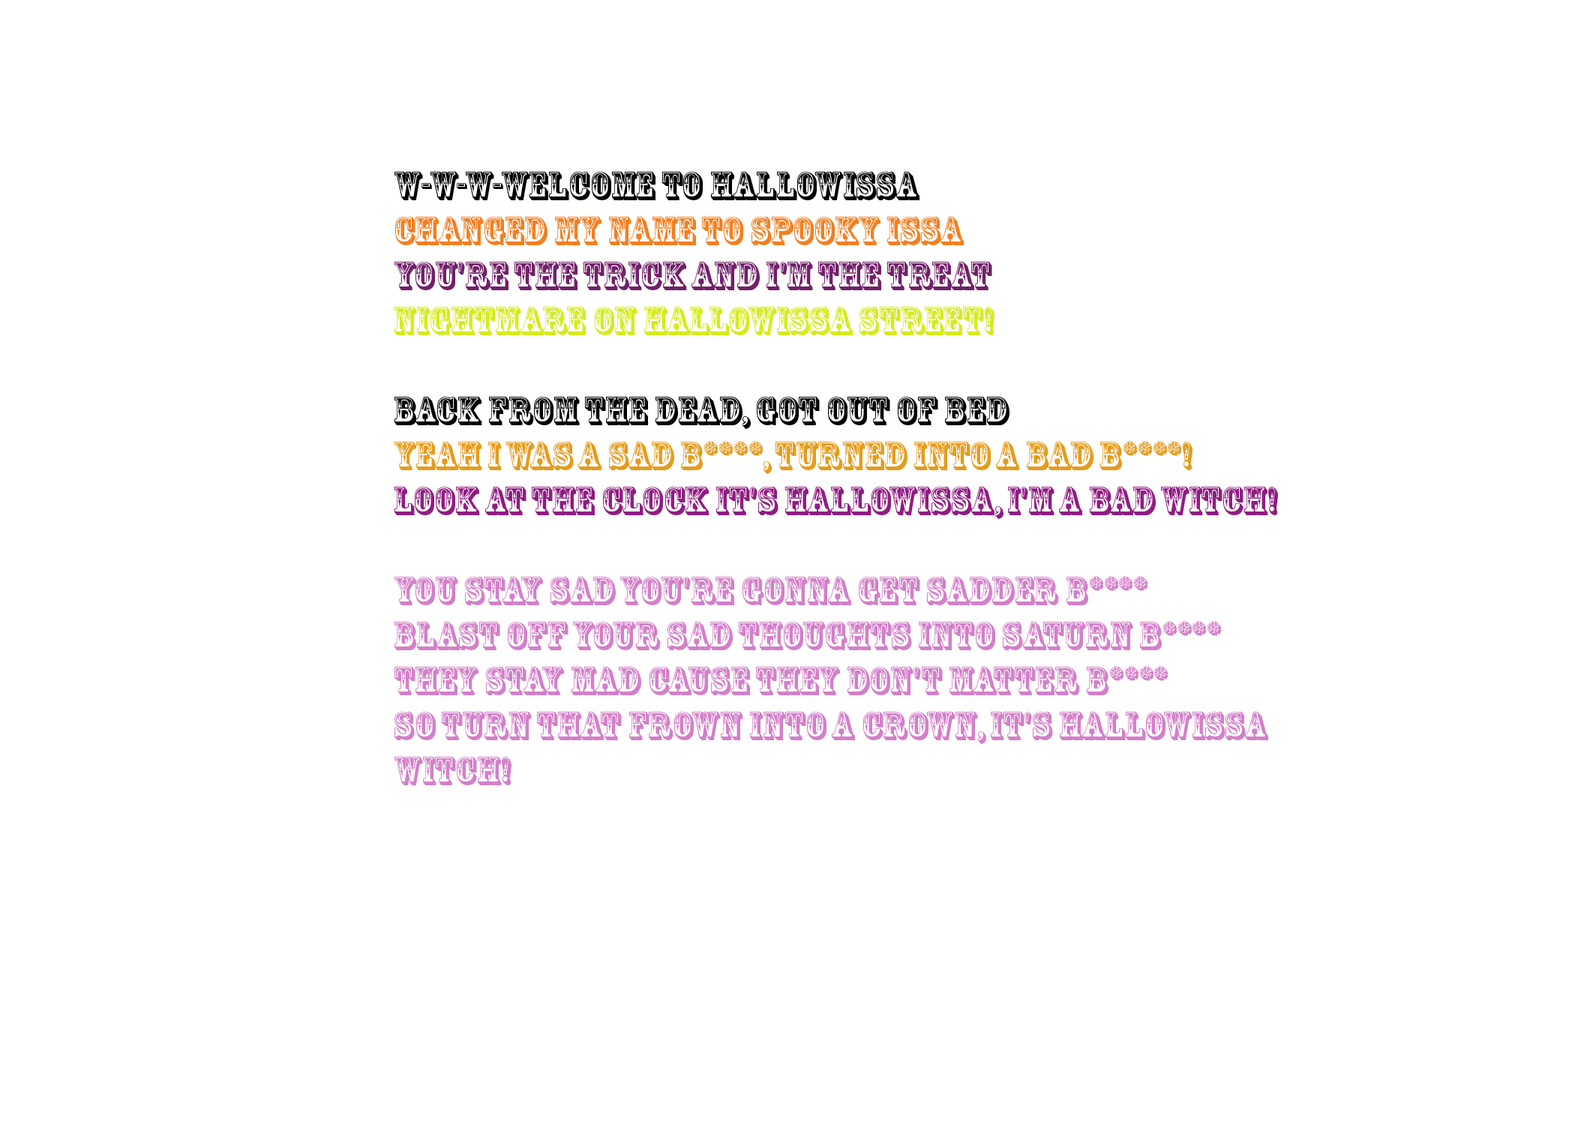
<style>
.page{position:relative;width:1575px;height:1125px;background:#ffffff}
.page>*{position:absolute;margin:0}
.t1{font:9px "RosewoodStd-Regular";color:#d37fc9}
.t2{font:9px "RosewoodStd-Regular";color:#000000}
.t3{font:9px "RosewoodStd-Regular";color:#f37f21}
.t4{font:9px "RosewoodStd-Regular";color:#712068}
.t5{font:9px "RosewoodStd-Regular";color:#d5eb1e}
.t6{font:9px "RosewoodStd-Regular";color:#e59c1e}
.t7{font:9px "RosewoodStd-Regular";color:#901c82}
</style>
<div class="page">
<p class="t1" style="left:394px;top:172px;width:884px;height:613px"><span class="t2">W-W-W-Welcome to Hallowissa<br></span><span class="t3">Changed my name to Spooky Issa<br></span><span class="t4">You're the trick and I'm the treat<br></span><span class="t5">Nightmare on Hallowissa Street!<br><br></span><span class="t2">Back from the dead, got out of bed<br></span><span class="t6">Yeah I was a sad b****, turned into a bad b****!<br></span><span class="t7">Look at the clock it's Hallowissa, I'm a bad witch!<br></span><br>You stay sad you're gonna get sadder b****<br>Blast off your sad thoughts into Saturn b****<br>They stay mad cause they don't matter b****<br>So turn that frown into a crown, it's Hallowissa Witch!</p>
</div>
